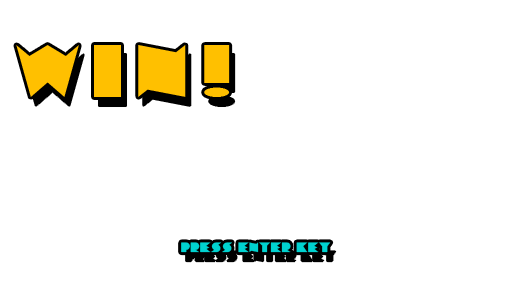
<style>
.page{position:relative;width:512px;height:288px;background:#ffffff}
.page>*{position:absolute;margin:0}
.t1{font:72px "ChainsawGeometric";letter-spacing:0.2em;color:#ffc000}
.t2{font:13.1px "ChainsawGeometric";letter-spacing:0.05em;color:#00d2d0}
</style>
<div class="page">
<p class="t1" style="left:16px;top:45px;width:214px;height:52px">WIN!</p>
<p class="t2" style="left:181px;top:242px;width:150px;height:11px">PRESS ENTER KEY</p>
</div>
